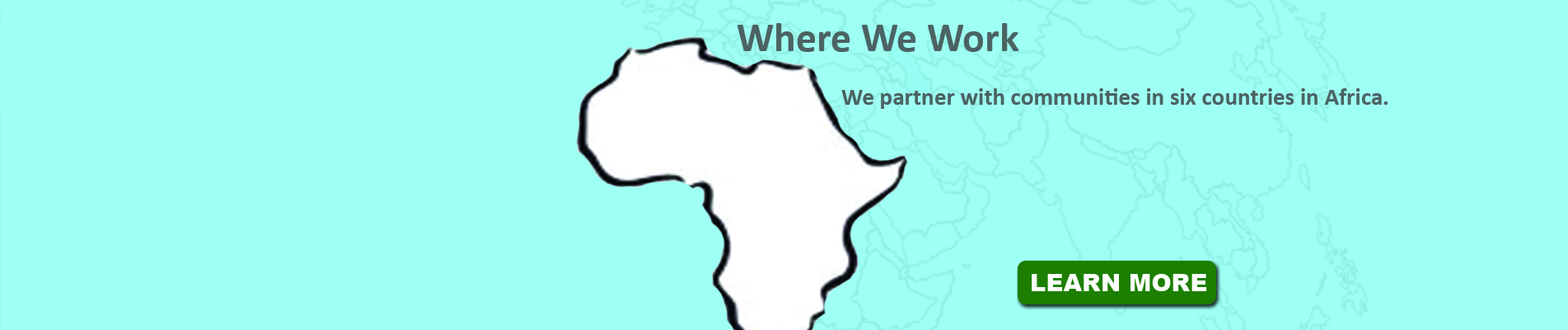
<style>
.page{position:relative;width:1568px;height:330px;background:#9efff3}
.page>*{position:absolute;margin:0}
.t1{font:24px "Calibri-Bold";color:#4b6362}
.t2{font:41.2px "Calibri-Bold";color:#4b6362}
.t3{font:24px "Arial-Black";color:#fcfffc}
</style>
<div class="page">
<p class="t1" style="left:737px;top:23px;width:651px;height:86px;text-align:center"><span class="t2">Where We Work<br><br>                                                                                                      </span>We partner with communities in six countries in Africa.</p>
<p class="t3" style="left:1032px;top:274px;width:175px;height:17px">LEARN MORE</p>
</div>
